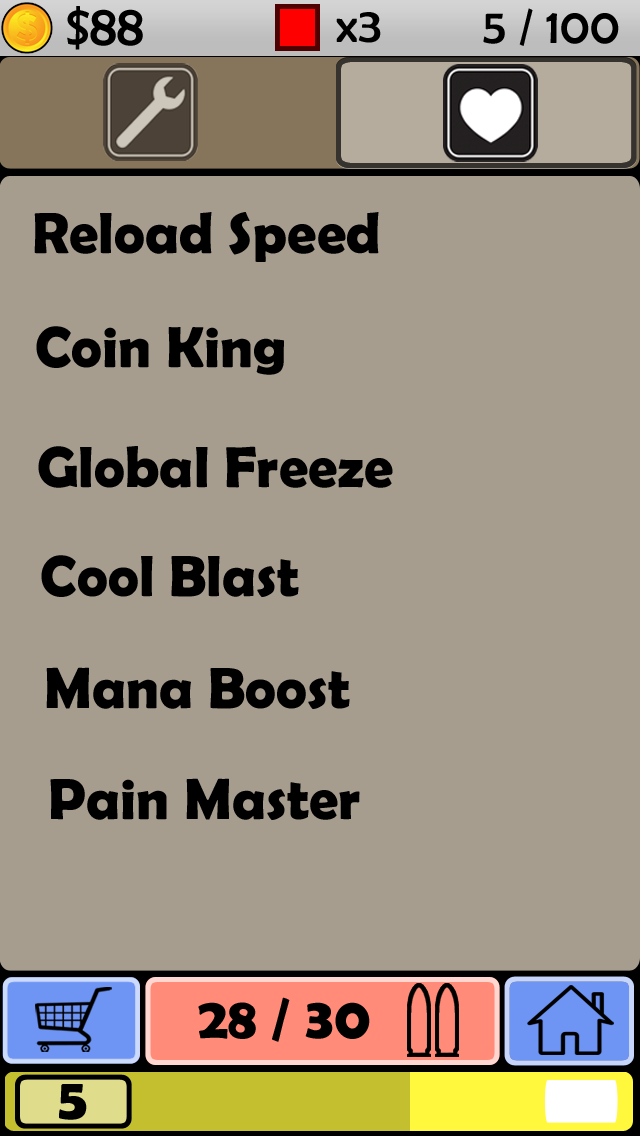
<style>
.page{position:relative;width:640px;height:1136px;background:#a69d8f}
.page>*{position:absolute;margin:0}
.t1{font:58.3px "BerlinSansFB-Reg";color:#000000}
.t2{font:50px "BerlinSansFB-Reg";color:#000000}
.t3{font:58.3px "BerlinSansFBDemi-Bold";color:#000000}
</style>
<div class="page">
<p class="t1" style="left:67px;top:6px;width:76px;height:44px">$88</p>
<p class="t2" style="left:336px;top:12px;width:45px;height:31px">x3</p>
<p class="t2" style="left:483px;top:8px;width:136px;height:38px">5 / 100</p>
<p class="t3" style="left:34px;top:212px;width:345px;height:50px">Reload Speed</p>
<p class="t3" style="left:36px;top:326px;width:248px;height:49px">Coin King</p>
<p class="t3" style="left:38px;top:446px;width:355px;height:42px">Global Freeze</p>
<p class="t3" style="left:41px;top:555px;width:258px;height:42px">Cool Blast</p>
<p class="t3" style="left:46px;top:667px;width:304px;height:42px">Mana Boost</p>
<p class="t3" style="left:50px;top:778px;width:310px;height:42px">Pain Master</p>
<p class="t3" style="left:198px;top:997px;width:172px;height:45px">28 / 30</p>
<p class="t3" style="left:59px;top:1084px;width:28px;height:36px">5</p>
</div>
